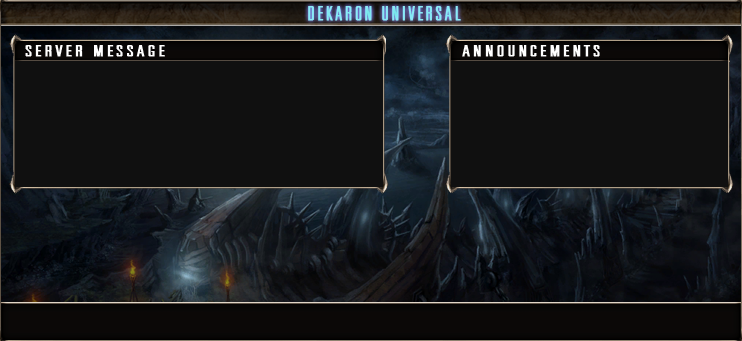
<style>
.page{position:relative;width:742px;height:341px;background:#101010}
.page>*{position:absolute;margin:0}
.t1{font:20px "UniversalAccreditation";letter-spacing:0.1em;color:#8aeaf7;text-transform:uppercase;font-weight:bold;scale:1.35 1}
.t2{font:15px "UniversalAccreditation";letter-spacing:0.1em;color:#ffffff;text-transform:uppercase;font-weight:bold;scale:2 1}
</style>
<div class="page">
<p class="t1" style="left:308px;top:6px;width:153px;height:15px">Dekaron Universal</p>
<p class="t2" style="left:25px;top:45px;width:140px;height:12px">Server Message</p>
<p class="t2" style="left:462px;top:45px;width:138px;height:12px">Announcements</p>
</div>
